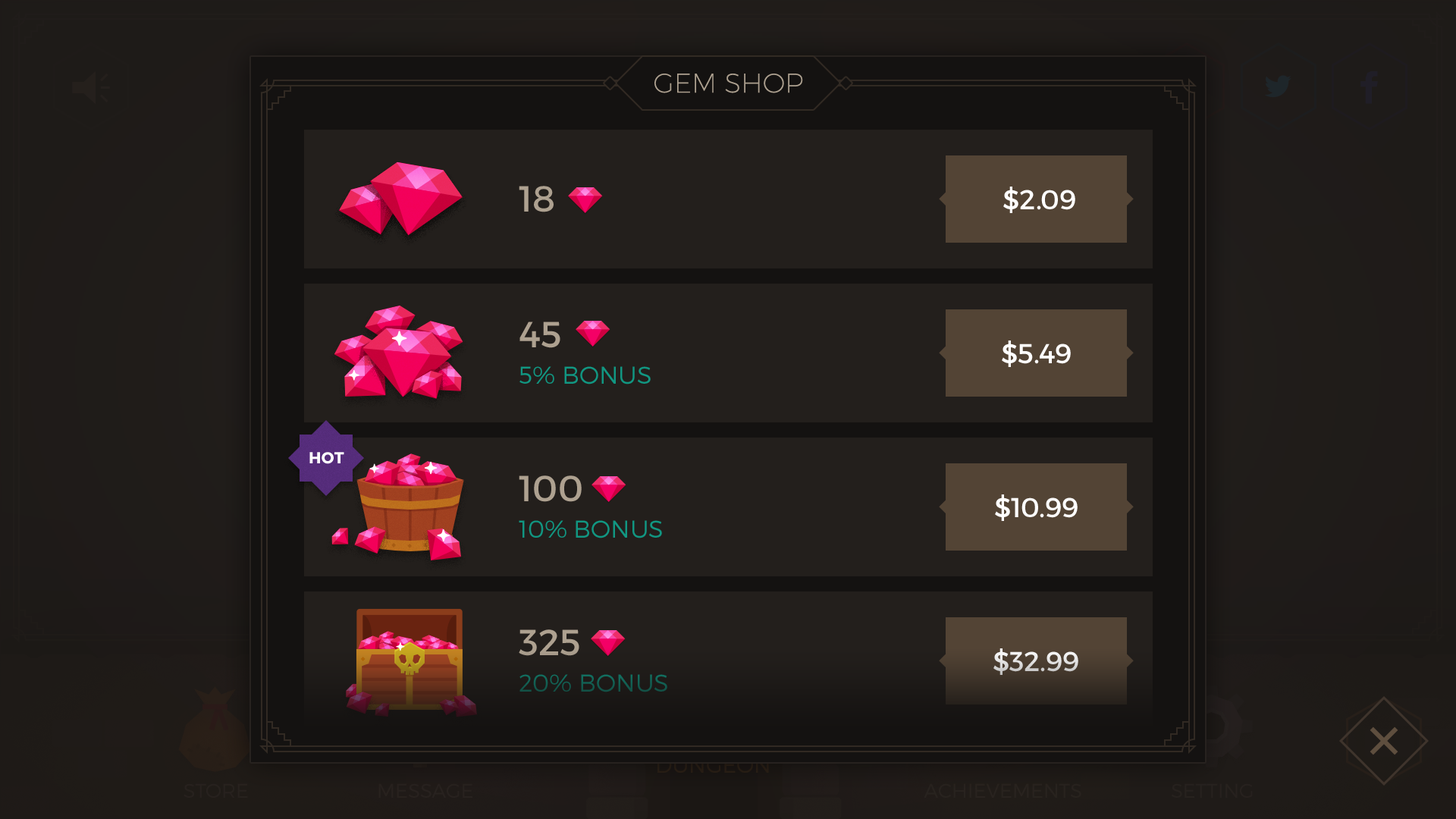
<style>
.page{position:relative;width:1456px;height:819px;background:#231f1c}
.page>*{position:absolute;margin:0}
.t1{font:27.2px "Montserrat-UltraLight";color:#aea190;text-transform:uppercase}
.t2{font:36.4px "Montserrat-Regular";color:#aea190}
.t3{font:27.3px "Montserrat-Regular";color:#ffffff}
.t4{font:24.3px "Montserrat-Light";color:#119782;text-transform:uppercase}
.t5{font:15.9px "Montserrat-Bold";letter-spacing:0.02em;color:#ffffff}
.t6{font:27.3px "Montserrat-Regular";color:#e2e2e2}
.t7{font:24.3px "Montserrat-Light";color:#125f53;text-transform:uppercase}
</style>
<div class="page">
<p class="t1" style="left:654px;top:74px;width:149px;height:19px">gem shop</p>
<p class="t2" style="left:519px;top:186px;width:35px;height:26px">18</p>
<p class="t3" style="left:1003px;top:187px;width:72px;height:26px">$2.09</p>
<p class="t2" style="left:519px;top:322px;width:41px;height:26px">45</p>
<p class="t3" style="left:1002px;top:340px;width:69px;height:27px">$5.49</p>
<p class="t4" style="left:519px;top:366px;width:132px;height:18px">5% Bonus</p>
<p class="t5" style="left:309px;top:452px;width:35px;height:12px">HOT</p>
<p class="t2" style="left:519px;top:475px;width:63px;height:27px">100</p>
<p class="t3" style="left:995px;top:494px;width:83px;height:27px">$10.99</p>
<p class="t4" style="left:519px;top:520px;width:143px;height:18px">10% Bonus</p>
<p class="t2" style="left:519px;top:629px;width:60px;height:27px">325</p>
<p class="t6" style="left:993px;top:648px;width:85px;height:27px">$32.99</p>
<p class="t7" style="left:519px;top:674px;width:148px;height:18px">20% Bonus</p>
</div>
